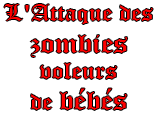
<style>
.page{position:relative;width:160px;height:120px;background:#ffffff}
.page>*{position:absolute;margin:0}
.t1{font:21.8px "OldEnglishTextMT";color:#ff0000;scale:1.21 1}
.t2{font:26.2px "OldEnglishTextMT";color:#ff0000;scale:1.21 1}
</style>
<div class="page">
<p class="t1" style="left:4px;top:4px;width:149px;height:106px;text-align:center">L'Attaque des<br><span class="t2">zombies<br></span>voleurs<br>de <span class="t2">bébés</span></p>
</div>
